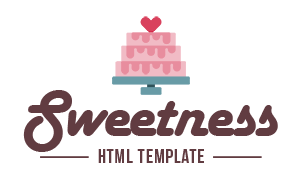
<style>
.page{position:relative;width:300px;height:194px;background:#ffffff}
.page>*{position:absolute;margin:0}
.t1{font:69.1px "HarlowSolid";letter-spacing:-0.025em;color:#613c41}
.t2{font:19.5px "BebasNeueBold";letter-spacing:0.05em;color:#613c41}
</style>
<div class="page">
<p class="t1" style="left:23px;top:90px;width:255px;height:62px">Sweetness</p>
<p class="t2" style="left:98px;top:149px;width:106px;height:14px">html template</p>
</div>
